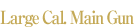
<style>
.page{position:relative;width:135px;height:27px;background:#ffffff}
.page>*{position:absolute;margin:0}
.t1{font:18px "RyuminPro-ExBold";letter-spacing:-0.1em;color:#c4a956;scale:0.9 1}
</style>
<div class="page">
<p class="t1" style="left:0px;top:10px;width:134px;height:17px">Large Cal. Main Gun</p>
</div>
